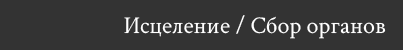
<style>
.page{position:relative;width:403px;height:50px;background:#333333}
.page>*{position:absolute;margin:0}
.t1{font:24px "CrimsonText-Regular";color:#ffffff}
</style>
<div class="page">
<p class="t1" style="left:124px;top:15px;width:262px;height:24px">Исцеление / Сбор органов</p>
</div>
